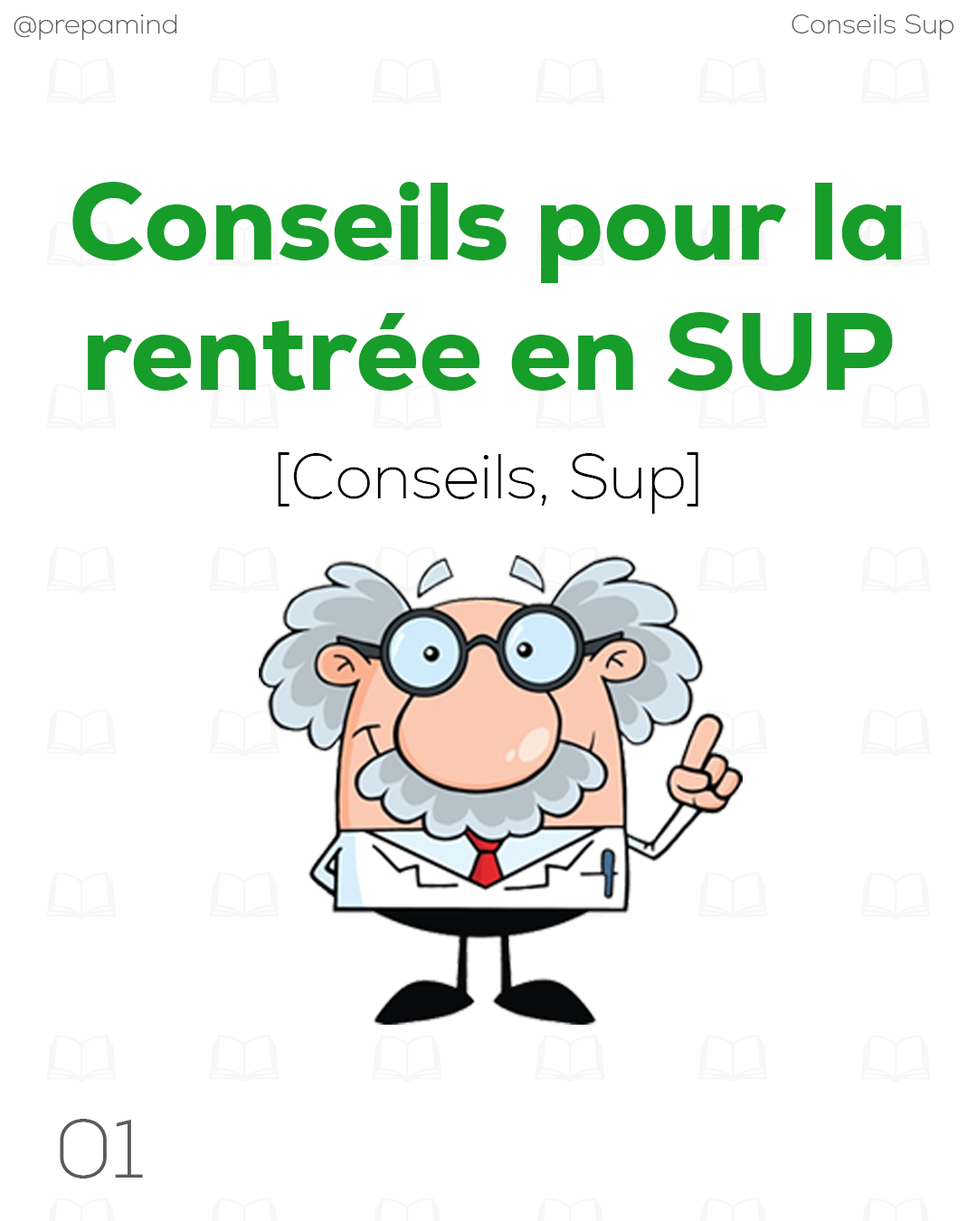
<style>
.page{position:relative;width:977px;height:1221px;background:#ffffff}
.page>*{position:absolute;margin:0}
.t1{font:27.1px "Nexa-ExtraLight";color:#5e5a5a}
.t2{font:108.5px "Nexa-Heavy";color:#179d2a}
.t3{font:63.3px "Nexa-ExtraLight";color:#000000}
.t4{font:81.7px "Nexa-ExtraLight";color:#5e5a5a}
</style>
<div class="page">
<p class="t1" style="left:14px;top:14px;width:163px;height:26px">@prepamind</p>
<p class="t1" style="left:791px;top:14px;width:163px;height:26px">Conseils Sup</p>
<p class="t2" style="left:72px;top:182px;width:830px;height:332px;text-align:center">Conseils pour la rentrée en SUP<br><br><br><br><span class="t3">[Conseils, Sup]</span></p>
<p class="t4" style="left:60px;top:1119px;width:83px;height:59px">01</p>
</div>
